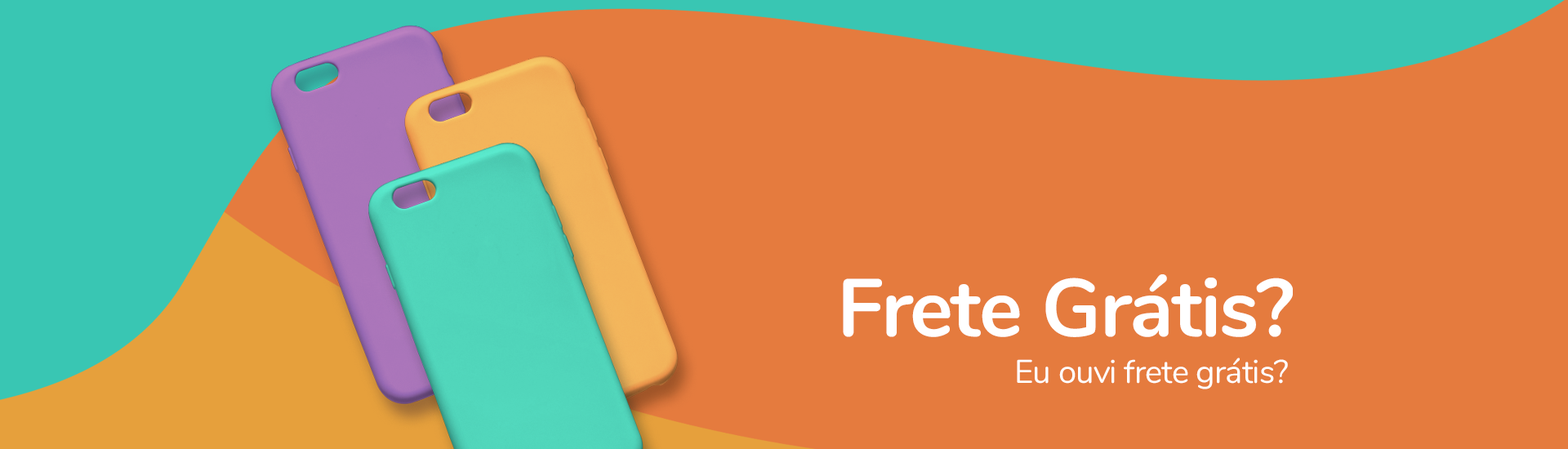
<style>
.page{position:relative;width:1568px;height:449px;background:#e57b3e}
.page>*{position:absolute;margin:0}
.t1{font:81.7px "Nunito-Bold";letter-spacing:-0.02em;color:#ffffff}
.t2{font:32.7px "Nunito-Regular";letter-spacing:-0.02em;color:#ffffff}
</style>
<div class="page">
<p class="t1" style="left:843px;top:274px;width:450px;height:63px">Frete Grátis?</p>
<p class="t2" style="left:1017px;top:358px;width:271px;height:32px">Eu ouvi frete grátis?</p>
</div>
